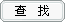
<style>
.page{position:relative;width:65px;height:22px;background:#f8f8f8}
.page>*{position:absolute;margin:0}
.t1{font:12px "SimSun";letter-spacing:0.2em;color:#000000}
</style>
<div class="page">
<p class="t1" style="left:15px;top:5px;width:34px;height:11px">查 找</p>
</div>
